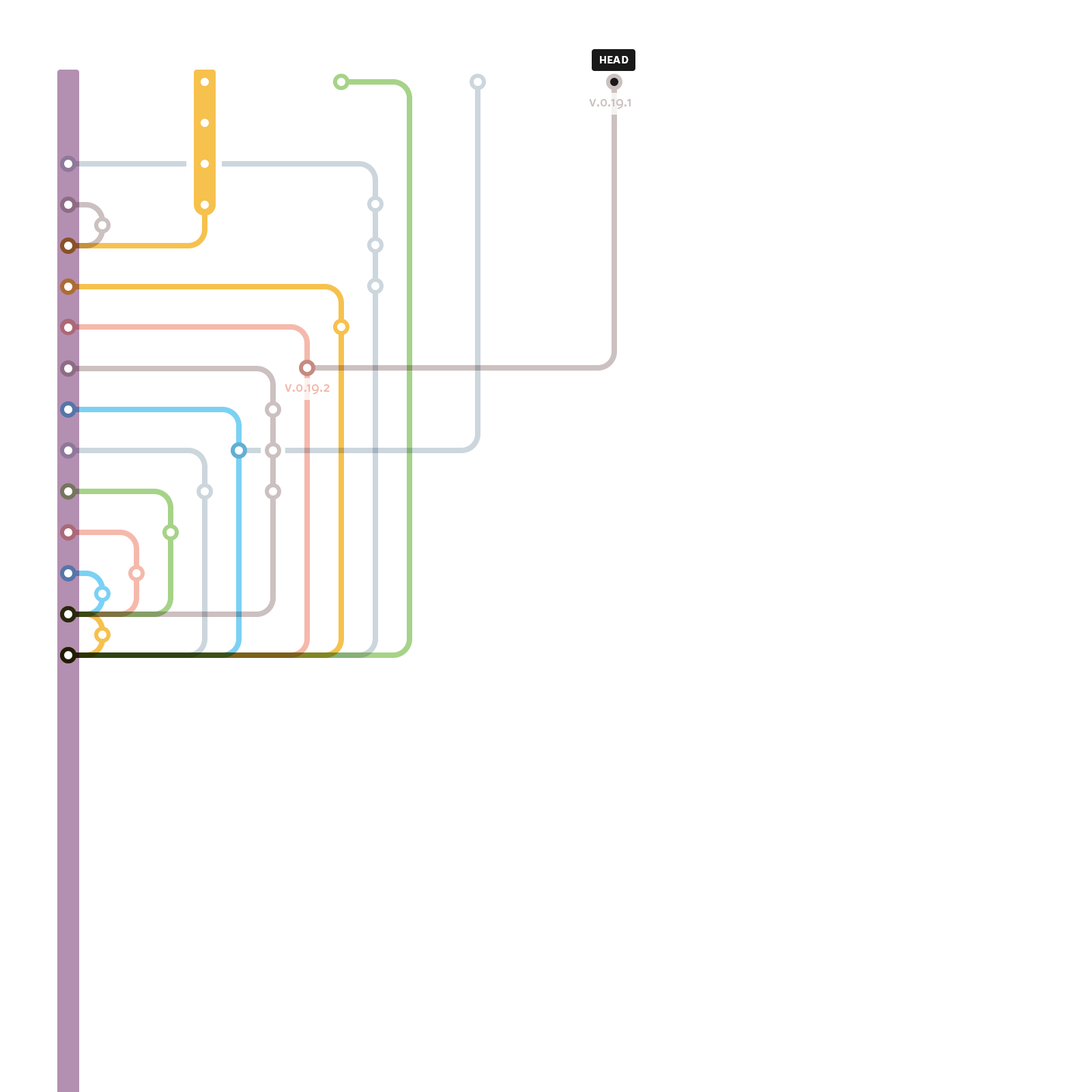
<style>
.page{position:relative;width:1092px;height:1092px;background:#ffffff}
.page>*{position:absolute;margin:0}
.t1{font:13.6px "WhitneyHTF-SemiBoldSC";letter-spacing:0.02em;color:#ffffff}
.t2{font:13.6px "WhitneyHTF-SemiBoldSC";letter-spacing:0.02em;color:#ccc0c0}
.t3{font:13.6px "WhitneyHTF-SemiBoldSC";letter-spacing:0.02em;color:#f5b9ab}
</style>
<div class="page">
<p class="t1" style="left:600px;top:56px;width:29px;height:7px">head</p>
<p class="t2" style="left:589px;top:99px;width:42px;height:10px">v.0.19.1</p>
<p class="t3" style="left:285px;top:384px;width:45px;height:10px">v.0.19.2</p>
</div>
